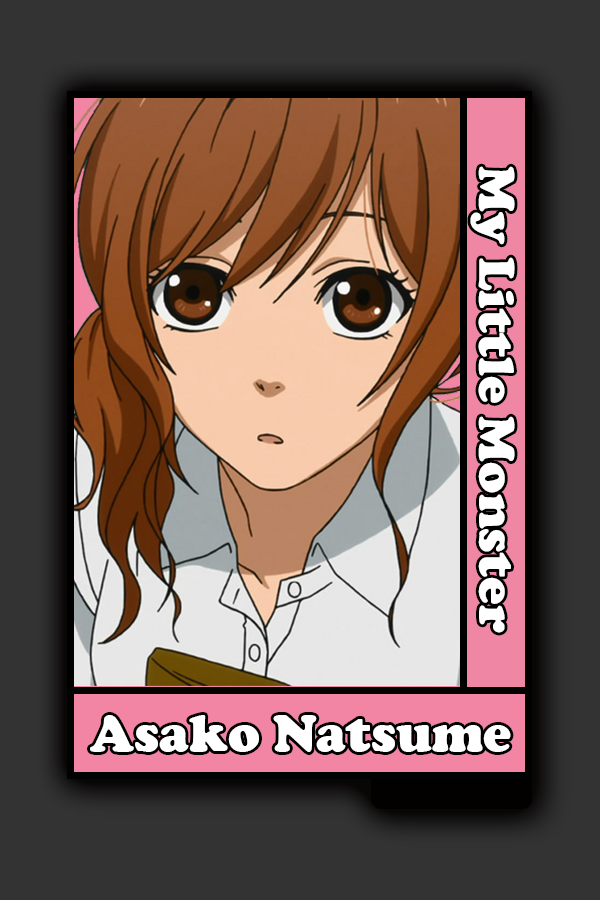
<style>
.page{position:relative;width:600px;height:900px;background:#333333}
.page>*{position:absolute;margin:0}
.t1{font:52px "CooperBlack";color:#ffffff}
.t2{font:52.8px "CooperBlack";color:#ffffff}
</style>
<div class="page">
<p class="t1" style="left:470px;top:166px;width:45px;height:467px;rotate:90deg">My Little Monster</p>
<p class="t2" style="left:90px;top:715px;width:421px;height:37px">Asako Natsume</p>
</div>
